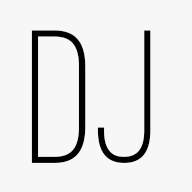
<style>
.page{position:relative;width:192px;height:192px;background:#f7f7f7}
.page>*{position:absolute;margin:0}
.t1{font:337.5px "OstrichSans-Medium";color:#000000}
</style>
<div class="page">
<p class="t1" style="left:31px;top:30px;width:120px;height:133px">DJ</p>
</div>
